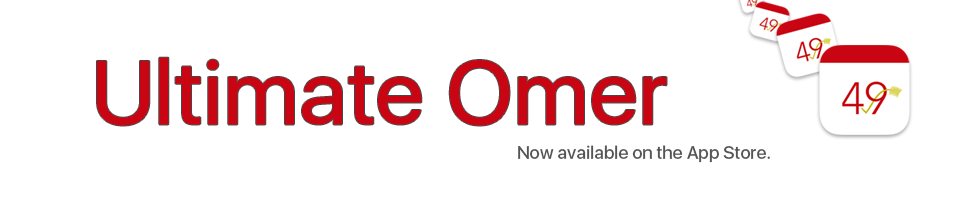
<style>
.page{position:relative;width:960px;height:200px;background:#ffffff}
.page>*{position:absolute;margin:0}
.t1{font:90px "SFUIDisplay-Regular";color:#c90513;font-weight:bold}
.t2{font:18px "SFUIDisplay-Medium";color:#555555}
</style>
<div class="page">
<p class="t1" style="left:97px;top:57px;width:570px;height:69px">Ultimate Omer</p>
<p class="t2" style="left:518px;top:145px;width:252px;height:18px">Now available on the App Store.</p>
</div>
